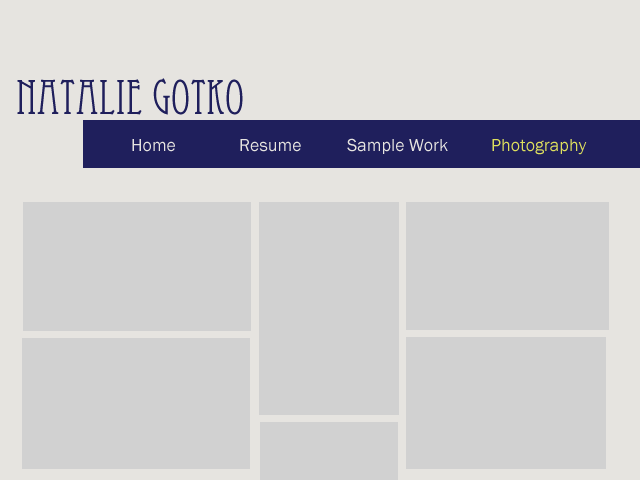
<style>
.page{position:relative;width:640px;height:480px;background:#d1d1d1}
.page>*{position:absolute;margin:0}
.t1{font:48px "EccentricStd";color:#1f1f5c}
.t2{font:18px "FranklinGothic-Book";color:#e6e4e0}
.t3{font:18px "FranklinGothic-Book";color:#dddf5d}
</style>
<div class="page">
<p class="t1" style="left:17px;top:78px;width:226px;height:37px">Natalie Gotko</p>
<p class="t2" style="left:132px;top:138px;width:455px;height:17px">Home  Resume  Sample Work  <span class="t3">Photography</span></p>
</div>
